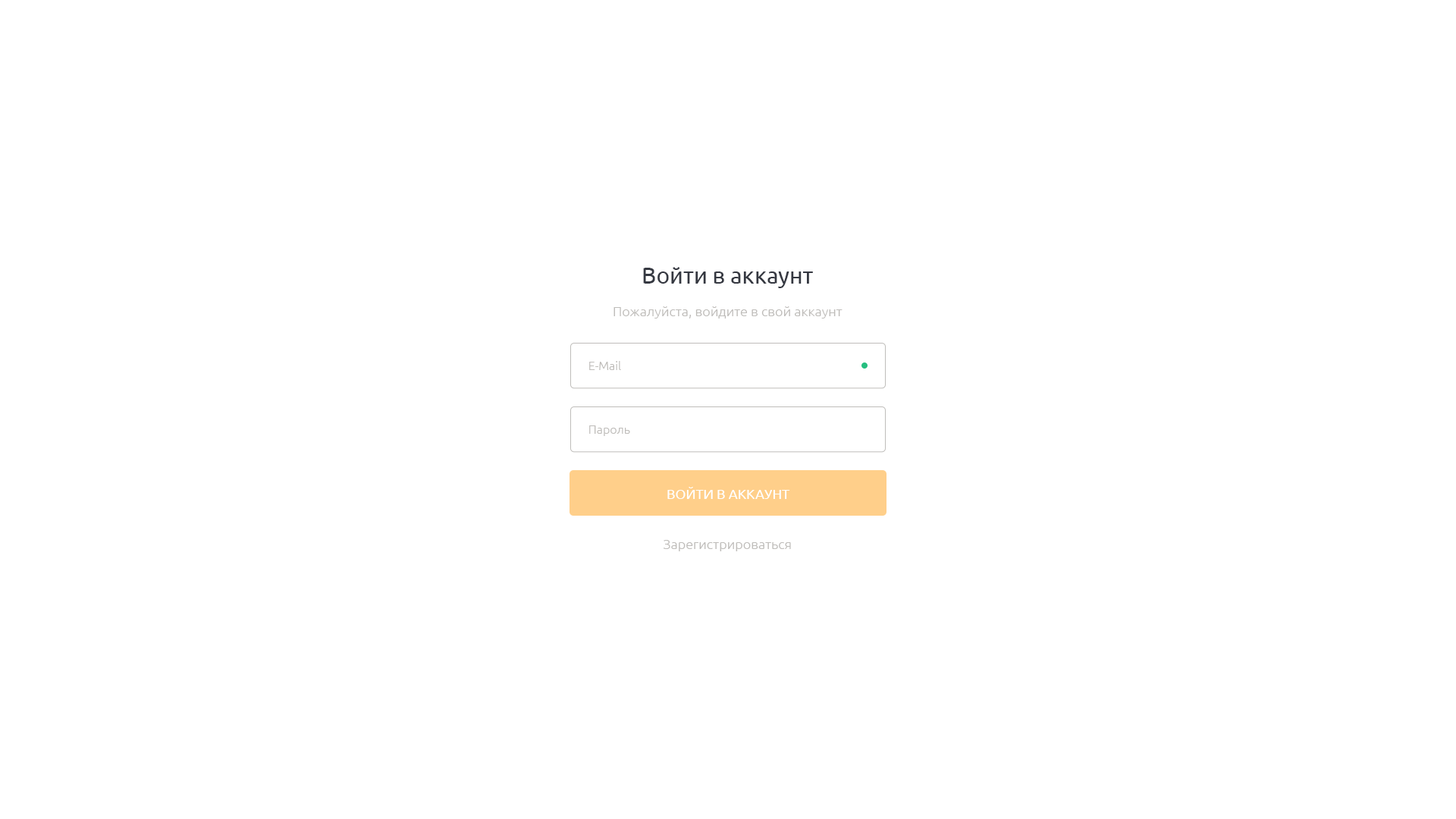
<style>
.page{position:relative;width:1456px;height:819px;background:#ffffff}
.page>*{position:absolute;margin:0}
.t1{font:22.7px "Ubuntu";color:#353841}
.t2{font:13.6px "Ubuntu-Light";color:#bfbdba}
.t3{font:12.1px "Ubuntu-Light";color:#bfbdba}
.t4{font:13.6px "Ubuntu";color:#ffffff;text-transform:uppercase}
</style>
<div class="page">
<p class="t1" style="left:643px;top:267px;width:170px;height:21px">Войти в аккаунт</p>
<p class="t2" style="left:613px;top:306px;width:229px;height:12px">Пожалуйста, войдите в свой аккаунт</p>
<p class="t3" style="left:589px;top:361px;width:32px;height:9px">E-Mail</p>
<p class="t3" style="left:589px;top:425px;width:41px;height:11px">Пароль</p>
<p class="t4" style="left:667px;top:487px;width:123px;height:12px">Войти в аккаунт</p>
<p class="t2" style="left:664px;top:540px;width:127px;height:11px">Зарегистрироваться</p>
</div>
